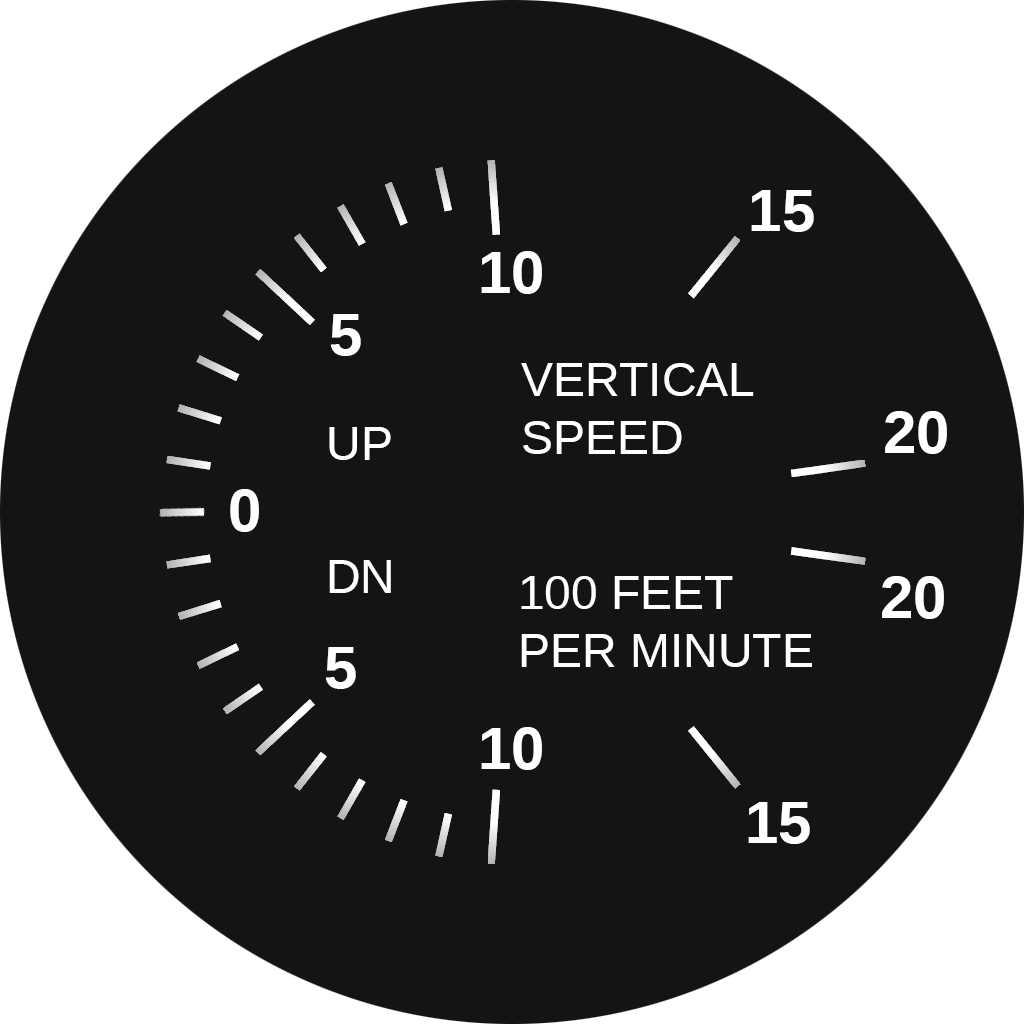
<style>
.page{position:relative;width:1024px;height:1024px;background:#141414}
.page>*{position:absolute;margin:0}
.t1{font:60px "LiberationSans-Bold";color:#ffffff}
.t2{font:48px "LiberationSans";color:#ffffff}
</style>
<div class="page">
<p class="t1" style="left:751px;top:190px;width:63px;height:42px">15</p>
<p class="t1" style="left:481px;top:251px;width:61px;height:43px">10</p>
<p class="t1" style="left:330px;top:314px;width:31px;height:42px">5</p>
<p class="t2" style="left:521px;top:363px;width:233px;height:91px">VERTICAL<br>SPEED</p>
<p class="t1" style="left:885px;top:411px;width:62px;height:43px">20</p>
<p class="t2" style="left:329px;top:427px;width:62px;height:33px">UP</p>
<p class="t1" style="left:230px;top:489px;width:29px;height:43px">0</p>
<p class="t2" style="left:329px;top:560px;width:62px;height:33px">DN</p>
<p class="t2" style="left:521px;top:576px;width:291px;height:91px">100 FEET<br>PER MINUTE</p>
<p class="t1" style="left:882px;top:576px;width:62px;height:43px">20</p>
<p class="t1" style="left:325px;top:647px;width:31px;height:42px">5</p>
<p class="t1" style="left:481px;top:727px;width:61px;height:43px">10</p>
<p class="t1" style="left:748px;top:802px;width:62px;height:42px">15</p>
</div>
